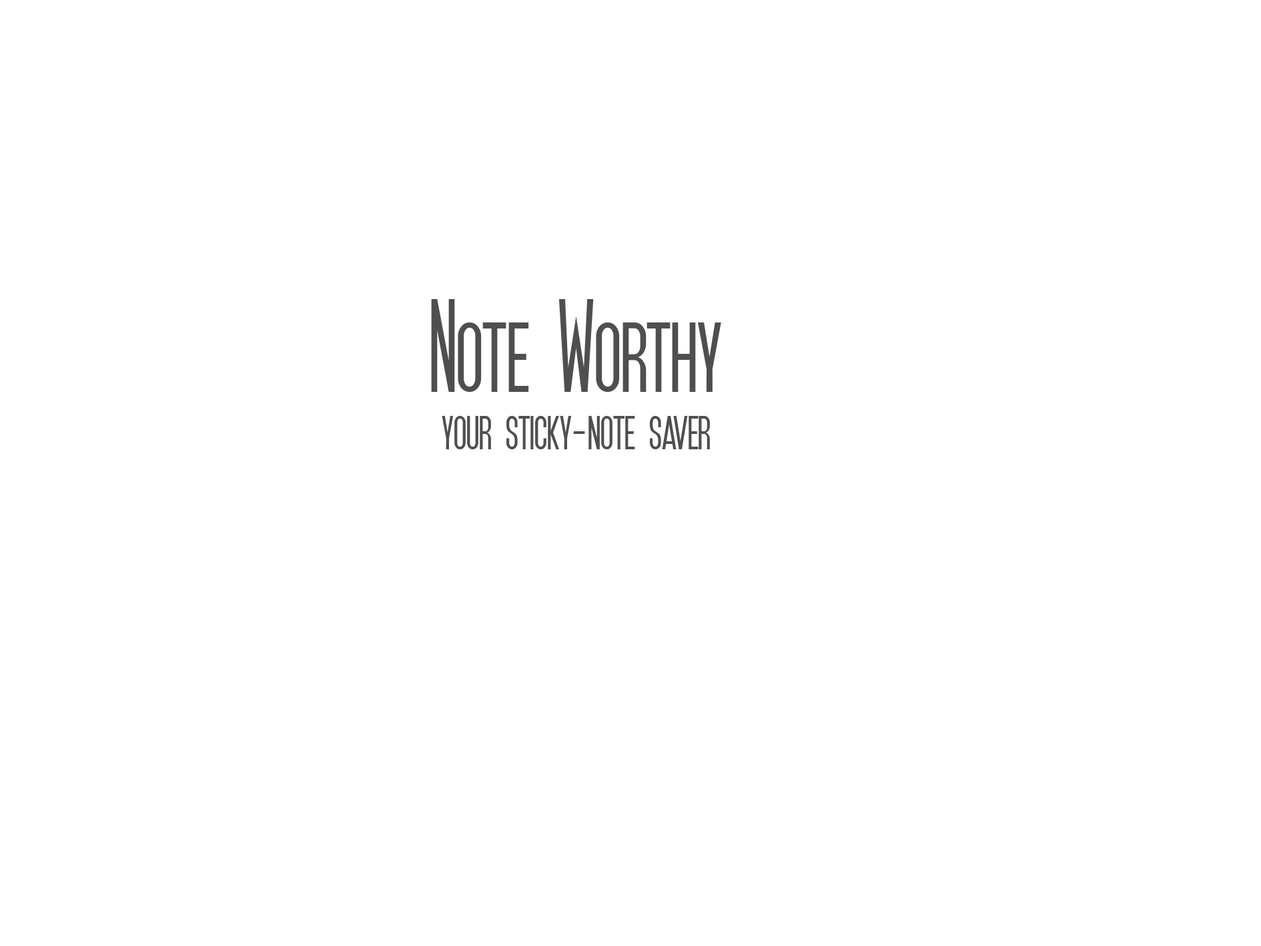
<style>
.page{position:relative;width:1261px;height:946px;background:#ffffff}
.page>*{position:absolute;margin:0}
.t1{font:139px "SFMoviePoster";color:#4f4f4f}
.t2{font:66.7px "SFMoviePoster";color:#4f4f4f}
</style>
<div class="page">
<p class="t1" style="left:431px;top:299px;width:290px;height:93px">Note Worthy</p>
<p class="t2" style="left:442px;top:416px;width:268px;height:33px">your sticky-note saver</p>
</div>
